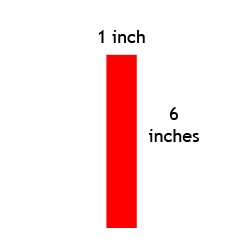
<style>
.page{position:relative;width:250px;height:250px;background:#ffffff}
.page>*{position:absolute;margin:0}
.t1{font:18px "TrebuchetMS";color:#000000}
</style>
<div class="page">
<p class="t1" style="left:98px;top:30px;width:47px;height:13px">1 inch</p>
<p class="t1" style="left:149px;top:107px;width:50px;height:35px;text-align:center">6 inches</p>
</div>
